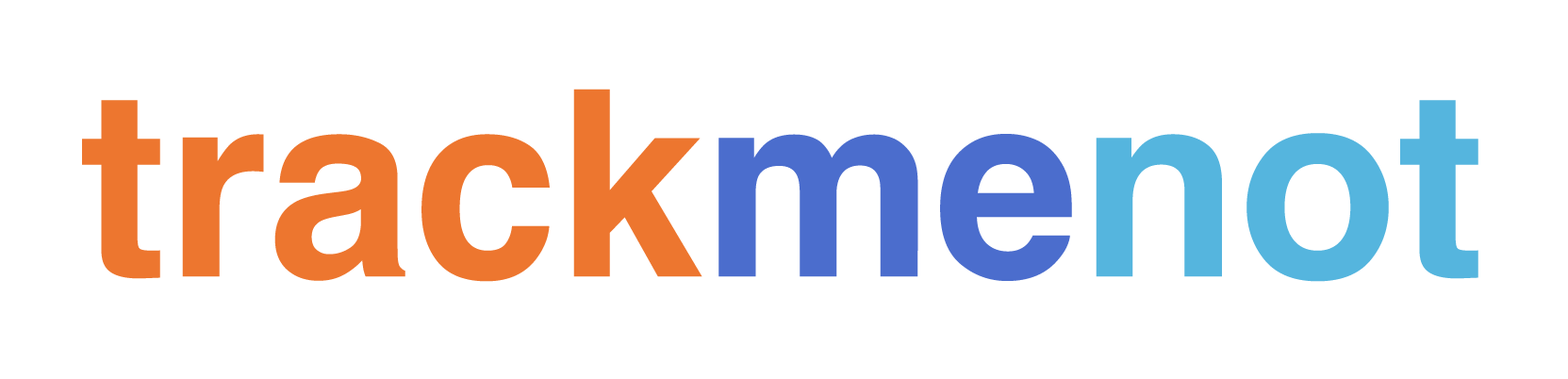
<style>
.page{position:relative;width:1568px;height:379px;background:#ffffff}
.page>*{position:absolute;margin:0}
.t1{font:260.6px "Helvetica-Bold";color:#ed762f}
.t2{font:260.6px "Helvetica-Bold";color:#4b6dcd}
.t3{font:260.6px "Helvetica-Bold";color:#55b5de}
</style>
<div class="page">
<p class="t1" style="left:82px;top:89px;width:1396px;height:193px">track<span class="t2">me</span><span class="t3">not</span></p>
</div>
